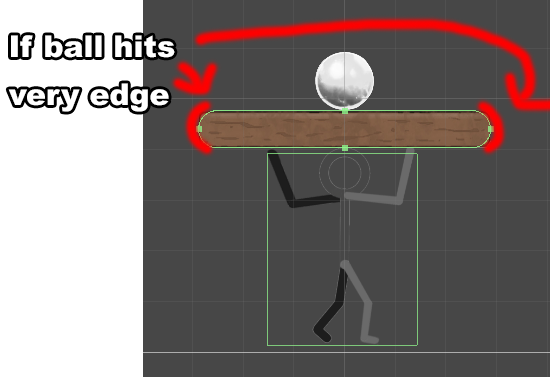
<style>
.page{position:relative;width:550px;height:377px;background:#474747}
.page>*{position:absolute;margin:0}
.t1{font:30px "Arial-Black";color:#ffffff}
</style>
<div class="page">
<p class="t1" style="left:8px;top:35px;width:167px;height:77px">If ball hits<br>very edge</p>
</div>
